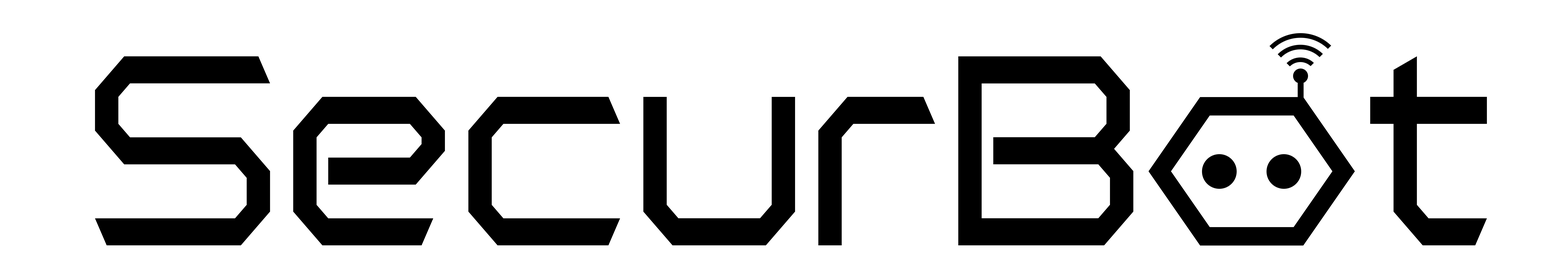
<style>
.page{position:relative;width:1568px;height:261px;background:#ffffff}
.page>*{position:absolute;margin:0}
.t1{font:276.7px "PolenticalNeonRegular";color:#000000;scale:0.86 1}
</style>
<div class="page">
<p class="t1" style="left:95px;top:56px;width:1038px;height:190px">SecurB</p>
<p class="t1" style="left:1370px;top:56px;width:117px;height:190px">t</p>
</div>
